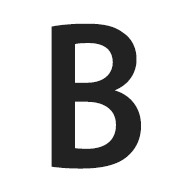
<style>
.page{position:relative;width:192px;height:192px;background:#ffffff}
.page>*{position:absolute;margin:0}
.t1{font:211.2px "MyriadPro-Semibold";letter-spacing:-0.02em;color:#222222;scale:0.91 1}
</style>
<div class="page">
<p class="t1" style="left:51px;top:23px;width:90px;height:146px">B</p>
</div>
